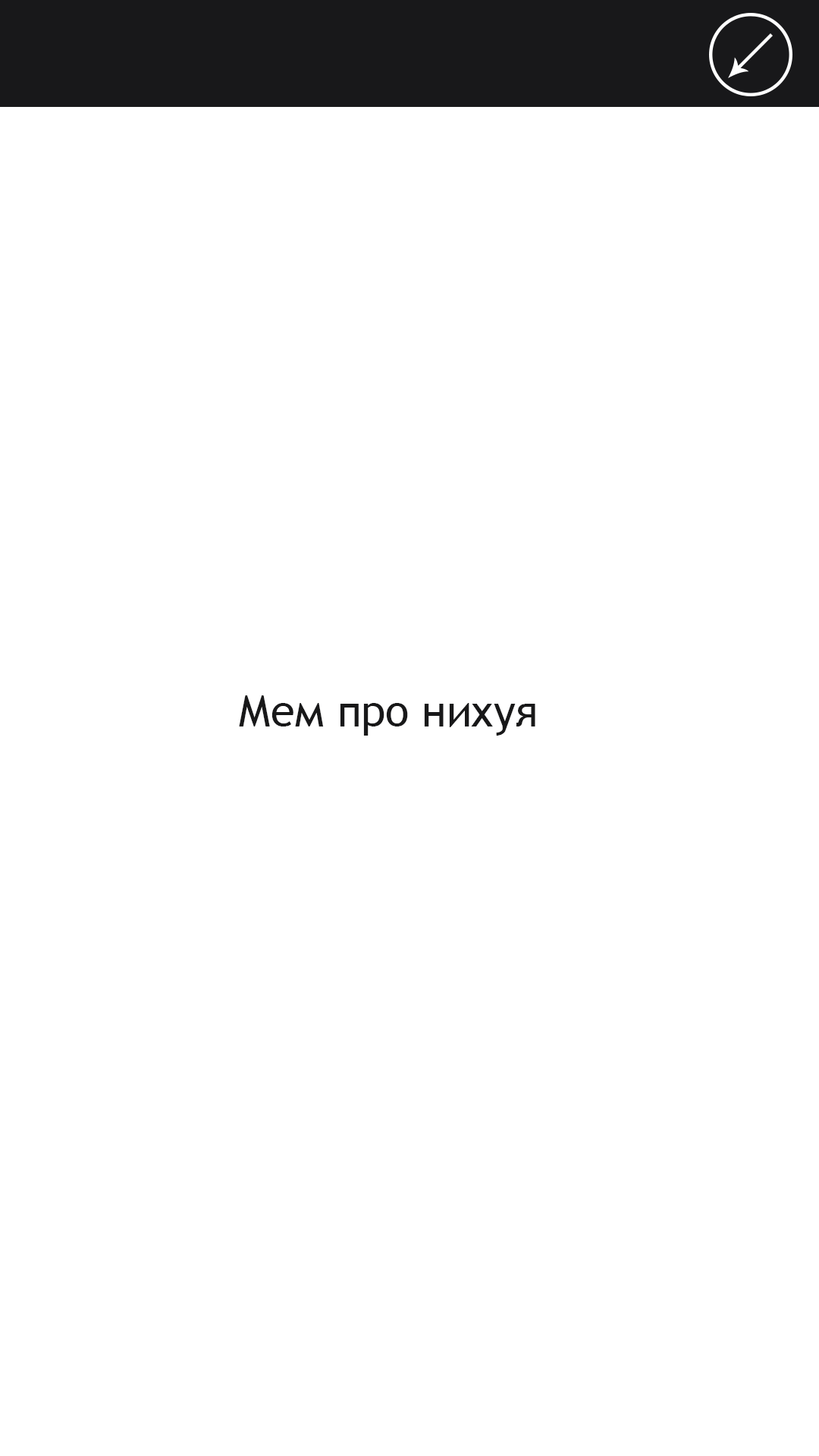
<style>
.page{position:relative;width:819px;height:1456px;background:#ffffff}
.page>*{position:absolute;margin:0}
.t1{font:43.6px "TrebuchetMS";color:#181819}
</style>
<div class="page">
<p class="t1" style="left:239px;top:695px;width:296px;height:41px">Мем про нихуя</p>
</div>
